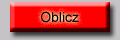
<style>
.page{position:relative;width:120px;height:40px;background:#ff0000}
.page>*{position:absolute;margin:0}
.t1{font:14px "ArialMT";color:#000000}
</style>
<div class="page">
<p class="t1" style="left:41px;top:11px;width:38px;height:12px">Oblicz</p>
</div>
